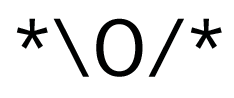
<style>
.page{position:relative;width:234px;height:98px;background:#ffffff}
.page>*{position:absolute;margin:0}
.t1{font:72px "Sathu";letter-spacing:0.025em;color:#000101}
</style>
<div class="page">
<p class="t1" style="left:16px;top:18px;width:206px;height:59px">*\O/*</p>
</div>
